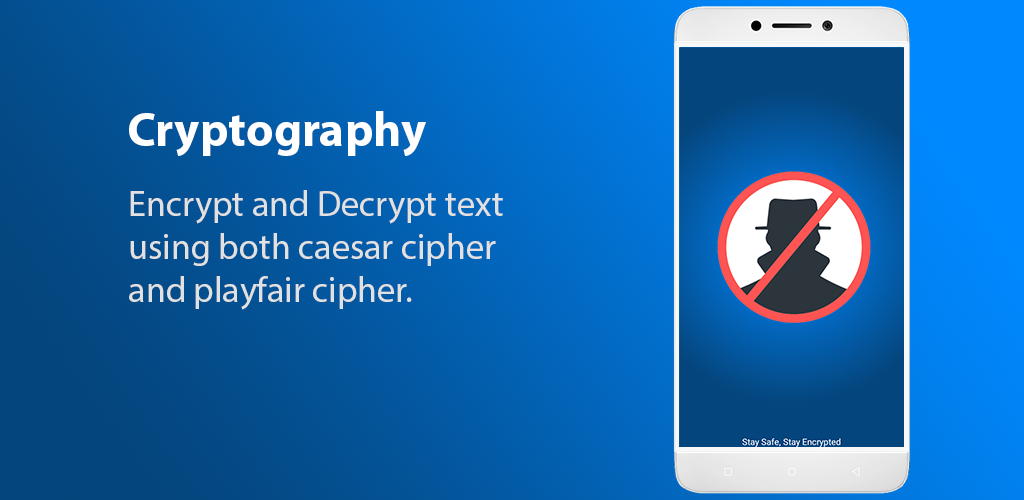
<style>
.page{position:relative;width:1024px;height:500px}
.page>*{position:absolute;margin:0}
.t1{font:48px "MyriadPro-Bold";color:#ffffff}
.t2{font:36px "MyriadPro-Regular";color:#e2e1e1}
</style>
<div class="page">
<p class="t1" style="left:129px;top:111px;width:297px;height:45px">Cryptography</p>
<p class="t2" style="left:129px;top:190px;width:374px;height:120px">Encrypt and Decrypt text <br>using both caesar cipher<br>and playfair cipher.</p>
</div>
